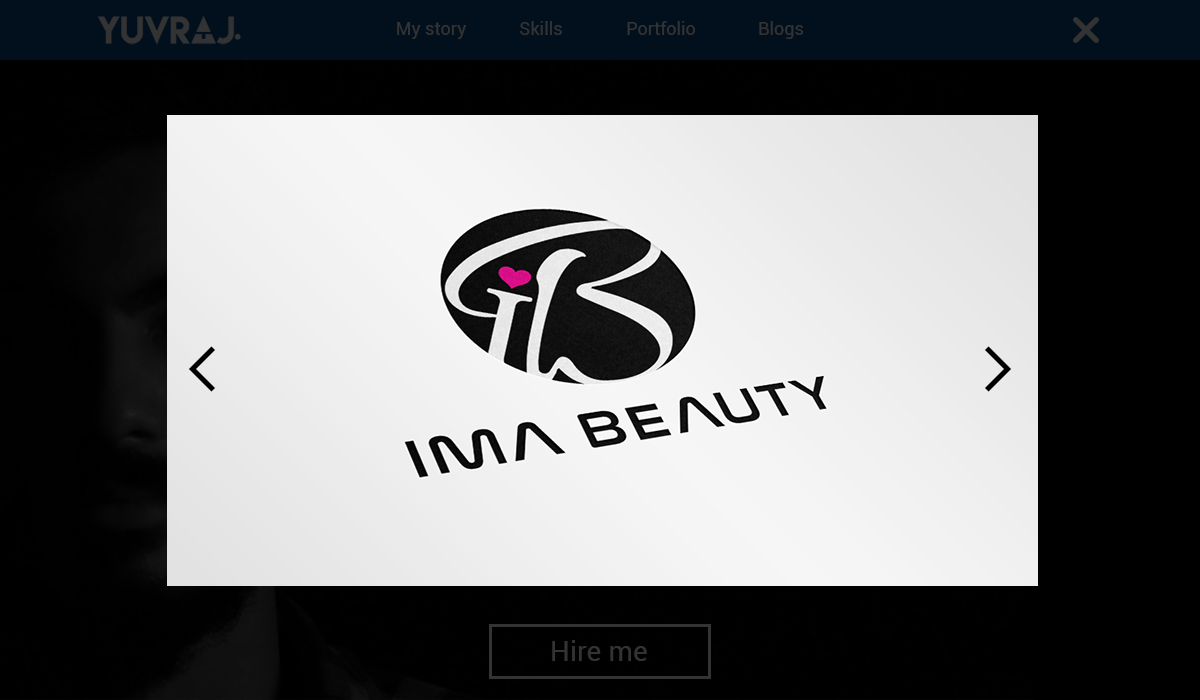
<style>
.page{position:relative;width:1200px;height:700px;background:#000000}
.page>*{position:absolute;margin:0}
.t1{font:18px "Roboto-Regular";color:#333333}
.t2{font:27.8px "Roboto-Regular";color:#333333}
</style>
<div class="page">
<p class="t1" style="left:397px;top:22px;width:69px;height:17px">My story</p>
<p class="t1" style="left:520px;top:21px;width:42px;height:14px">Skills</p>
<p class="t1" style="left:627px;top:21px;width:68px;height:14px">Portfolio</p>
<p class="t1" style="left:759px;top:21px;width:45px;height:18px">Blogs</p>
<p class="t2" style="left:552px;top:640px;width:95px;height:21px">Hire me</p>
</div>
